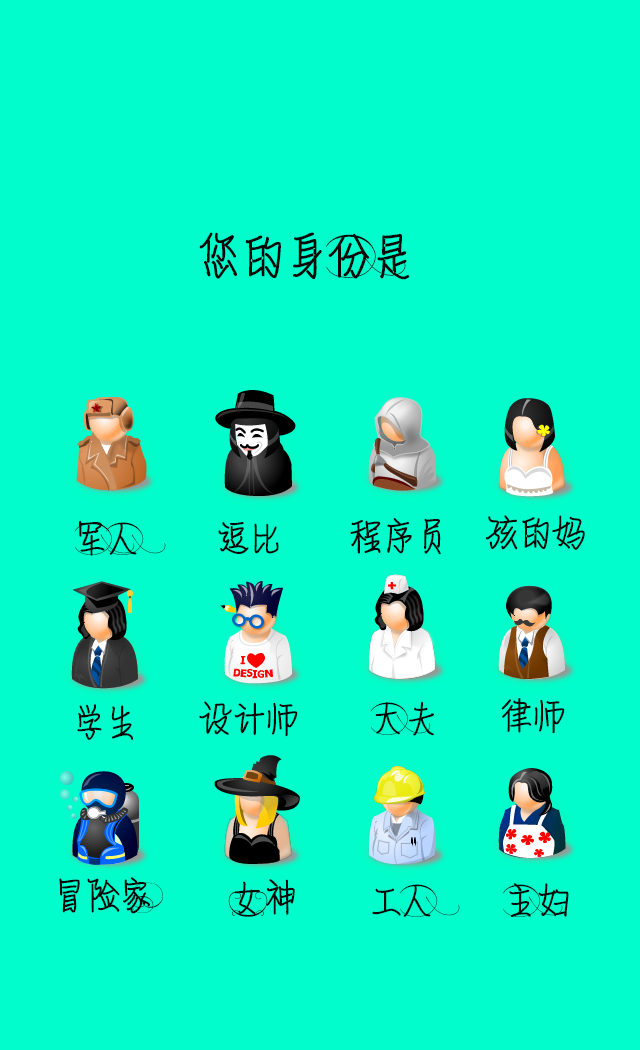
<style>
.page{position:relative;width:640px;height:1050px;background:#00fdcb}
.page>*{position:absolute;margin:0}
.t1{font:48px "¹ - ÇéÊéÌå";letter-spacing:-0.04em;color:#090909}
.t2{font:36px "¹ - ÇéÊéÌå";letter-spacing:-0.04em;color:#090909}
</style>
<div class="page">
<p class="t1" style="left:199px;top:232px;width:211px;height:48px">您的身份是</p>
<p class="t2" style="left:74px;top:520px;width:92px;height:36px">军人</p>
<p class="t2" style="left:350px;top:518px;width:91px;height:37px">程序员</p>
<p class="t2" style="left:485px;top:515px;width:100px;height:35px">孩的妈</p>
<p class="t2" style="left:218px;top:522px;width:61px;height:32px">逗比</p>
<p class="t2" style="left:199px;top:701px;width:99px;height:36px">设计师</p>
<p class="t2" style="left:370px;top:701px;width:64px;height:35px">大夫</p>
<p class="t2" style="left:501px;top:698px;width:64px;height:36px">律师</p>
<p class="t2" style="left:77px;top:704px;width:56px;height:36px">学生</p>
<p class="t2" style="left:59px;top:877px;width:104px;height:37px">冒险家</p>
<p class="t2" style="left:228px;top:879px;width:67px;height:38px">女神</p>
<p class="t2" style="left:372px;top:884px;width:88px;height:33px">工人</p>
<p class="t2" style="left:502px;top:883px;width:67px;height:34px">主妇</p>
</div>
